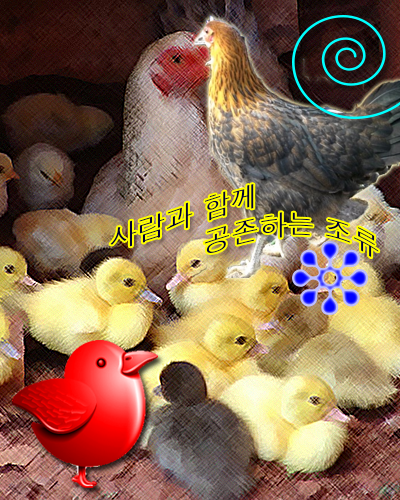
<style>
.page{position:relative;width:400px;height:500px}
.page>*{position:absolute;margin:0}
.t1{font:28.1px "Dotum";color:#000033}
</style>
<div class="page">
<p class="t1" style="left:110px;top:184px;width:269px;height:74px;text-align:center">사람과 함께<br>          공존하는 조류</p>
</div>
